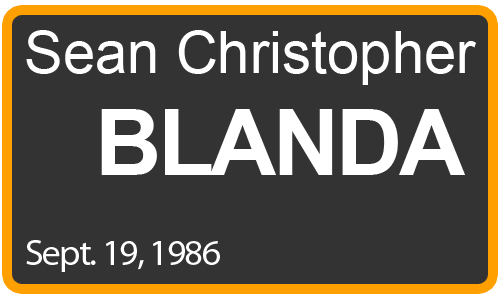
<style>
.page{position:relative;width:500px;height:300px;background:#333333}
.page>*{position:absolute;margin:0}
.t1{font:58px "ArialMT";color:#ffffff}
.t2{font:92px "Arial-BoldMT";letter-spacing:-0.04em;color:#ffffff}
.t3{font:37px "MyriadPro-Regular";letter-spacing:-0.04em;color:#ffffff}
</style>
<div class="page">
<p class="t1" style="left:26px;top:30px;width:450px;height:55px">Sean Christopher</p>
<p class="t2" style="left:101px;top:109px;width:364px;height:66px">BLANDA</p>
<p class="t3" style="left:26px;top:240px;width:194px;height:32px">Sept. 19, 1986</p>
</div>
